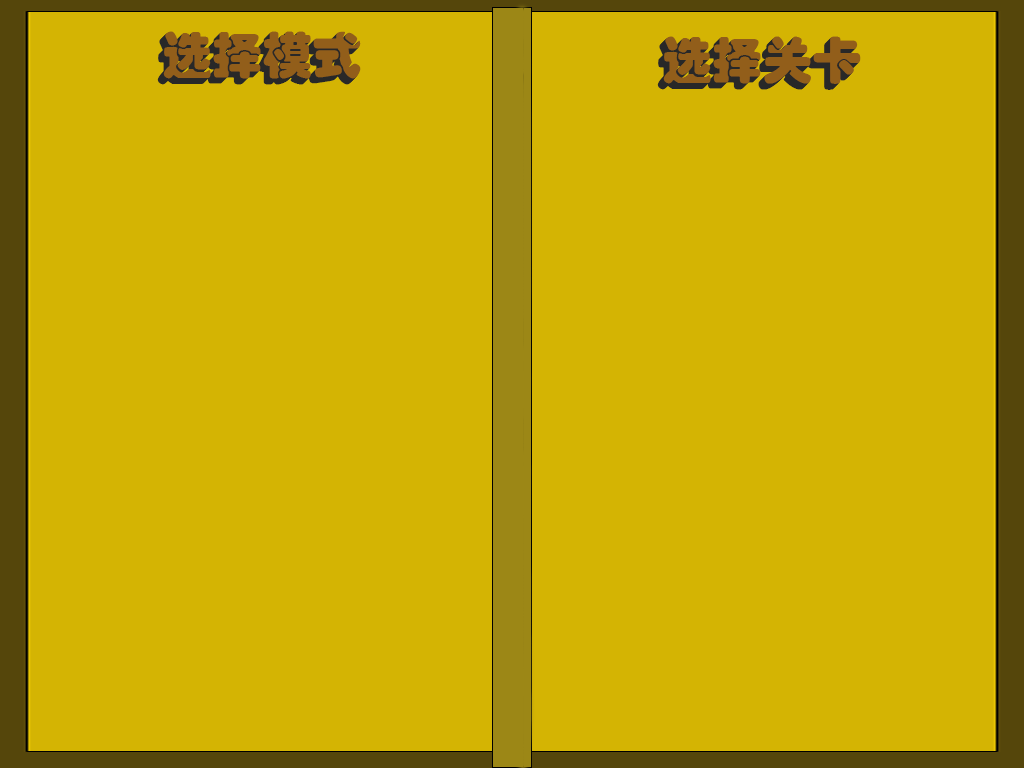
<style>
.page{position:relative;width:1024px;height:768px;background:#d4b403}
.page>*{position:absolute;margin:0}
.t1{font:50px "STHupo"}
.t2{font:50px "STHupo";color:#925e1a}
</style>
<div class="page">
<p class="t1" style="left:157px;top:37px;width:198px;height:48px">选择模式</p>
<p class="t1" style="left:158px;top:36px;width:198px;height:48px">选择模式</p>
<p class="t1" style="left:159px;top:35px;width:198px;height:48px">选择模式</p>
<p class="t1" style="left:160px;top:34px;width:198px;height:48px">选择模式</p>
<p class="t1" style="left:658px;top:41px;width:198px;height:48px">选择关卡</p>
<p class="t1" style="left:659px;top:40px;width:198px;height:48px">选择关卡</p>
<p class="t1" style="left:660px;top:39px;width:198px;height:48px">选择关卡</p>
<p class="t2" style="left:661px;top:38px;width:198px;height:48px">选择关卡</p>
<p class="t1" style="left:657px;top:42px;width:198px;height:48px">选择关卡</p>
</div>
